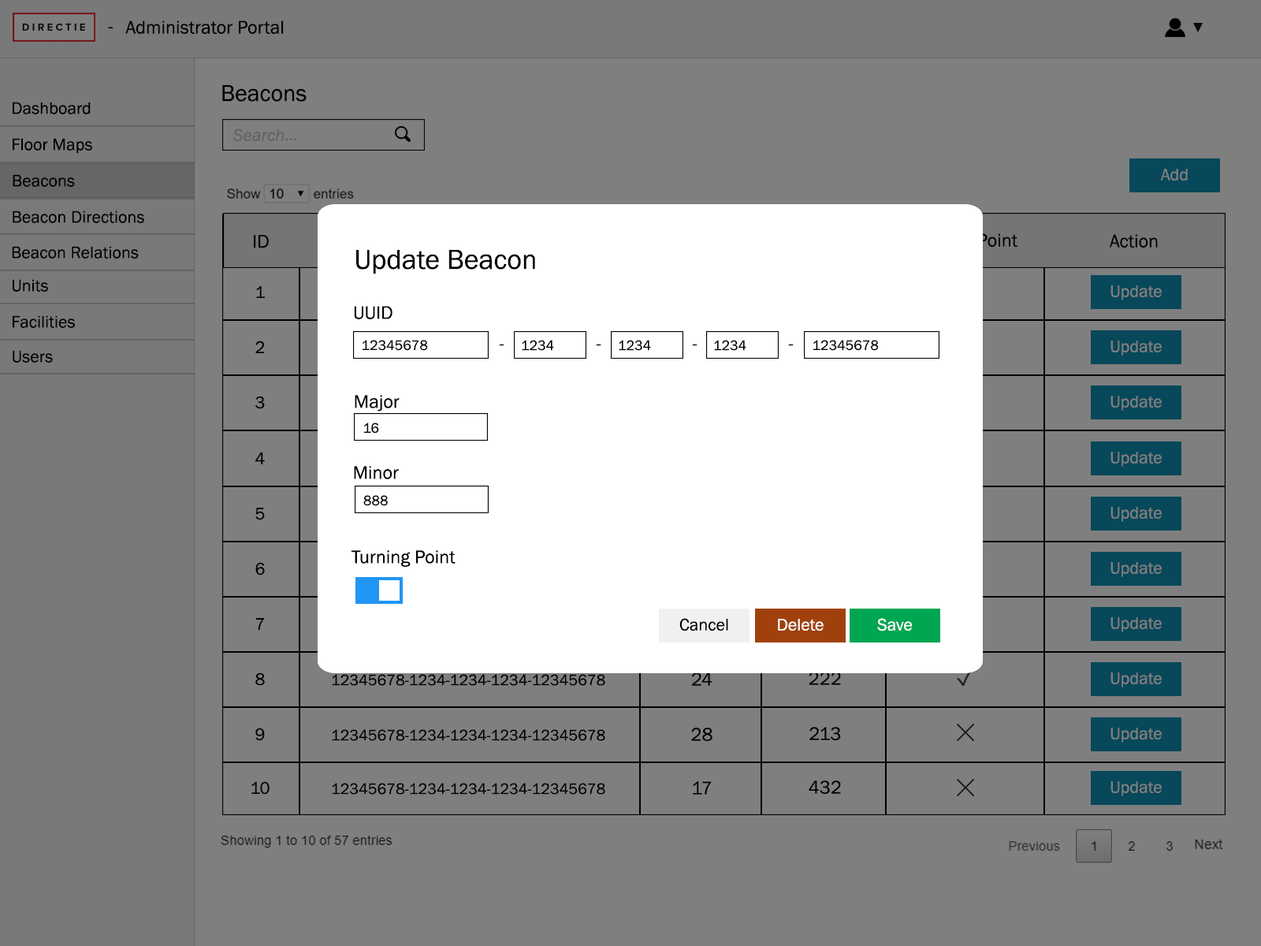
<style>
.page{position:relative;width:1261px;height:946px;background:#7f7f7f}
.page>*{position:absolute;margin:0}
.t1{font:18.9px "FranklinGothic-Book";color:#000000}
.t2{font:23.6px "FranklinGothic-Book";color:#000000}
.t3{font:17.3px "FranklinGothic-Book";color:#000000}
.t4{font:17.3px "FranklinGothic-Book";color:#7f7f7f}
.t5{font:28.4px "FranklinGothic-Book";color:#000000}
.t6{font:14.2px "FranklinGothic-Book";color:#000000}
.t7{font:17.3px "FranklinGothic-Book";color:#010101}
.t8{font:17.3px "FranklinGothic-Book";color:#fefefe}
.t9{font:15.8px "FranklinGothic-Book";color:#000000}
</style>
<div class="page">
<p class="t1" style="left:108px;top:27px;width:5px;height:1px">-</p>
<p class="t1" style="left:125px;top:20px;width:159px;height:14px">Administrator Portal</p>
<p class="t2" style="left:222px;top:85px;width:85px;height:17px">Beacons</p>
<p class="t3" style="left:13px;top:102px;width:78px;height:12px">Dashboard</p>
<p class="t3" style="left:13px;top:138px;width:79px;height:16px">Floor Maps</p>
<p class="t4" style="left:1160px;top:169px;width:28px;height:11px">Add</p>
<p class="t3" style="left:13px;top:174px;width:62px;height:13px">Beacons</p>
<p class="t3" style="left:13px;top:210px;width:131px;height:13px">Beacon Directions</p>
<p class="t3" style="left:12px;top:246px;width:127px;height:12px">Beacon Relations</p>
<p class="t1" style="left:254px;top:235px;width:15px;height:13px">ID</p>
<p class="t1" style="left:1109px;top:234px;width:49px;height:14px">Action</p>
<p class="t5" style="left:356px;top:250px;width:179px;height:24px">Update Beacon</p>
<p class="t3" style="left:13px;top:279px;width:35px;height:13px">Units</p>
<p class="t3" style="left:256px;top:285px;width:9px;height:13px">1</p>
<p class="t4" style="left:1110px;top:285px;width:52px;height:15px">Update</p>
<p class="t1" style="left:354px;top:306px;width:38px;height:13px">UUID</p>
<p class="t3" style="left:13px;top:315px;width:62px;height:13px">Facilities</p>
<p class="t3" style="left:255px;top:340px;width:10px;height:13px">2</p>
<p class="t6" style="left:363px;top:340px;width:65px;height:11px">12345678</p>
<p class="t6" style="left:522px;top:340px;width:32px;height:11px">1234</p>
<p class="t6" style="left:619px;top:340px;width:32px;height:11px">1234</p>
<p class="t6" style="left:714px;top:340px;width:32px;height:11px">1234</p>
<p class="t6" style="left:813px;top:340px;width:66px;height:11px">12345678</p>
<p class="t4" style="left:1110px;top:340px;width:52px;height:15px">Update</p>
<p class="t3" style="left:13px;top:350px;width:40px;height:13px">Users</p>
<p class="t1" style="left:499px;top:344px;width:5px;height:2px">-</p>
<p class="t1" style="left:596px;top:344px;width:5px;height:2px">-</p>
<p class="t1" style="left:692px;top:344px;width:5px;height:2px">-</p>
<p class="t1" style="left:788px;top:344px;width:6px;height:2px">-</p>
<p class="t3" style="left:255px;top:396px;width:10px;height:13px">3</p>
<p class="t1" style="left:355px;top:395px;width:45px;height:16px">Major</p>
<p class="t4" style="left:1110px;top:396px;width:52px;height:15px">Update</p>
<p class="t6" style="left:364px;top:422px;width:15px;height:11px">16</p>
<p class="t3" style="left:255px;top:452px;width:10px;height:12px">4</p>
<p class="t4" style="left:1110px;top:452px;width:52px;height:15px">Update</p>
<p class="t1" style="left:354px;top:466px;width:45px;height:13px">Minor</p>
<p class="t6" style="left:363px;top:495px;width:25px;height:11px">888</p>
<p class="t3" style="left:255px;top:508px;width:10px;height:12px">5</p>
<p class="t4" style="left:1110px;top:507px;width:52px;height:15px">Update</p>
<p class="t1" style="left:351px;top:550px;width:105px;height:17px">Turning Point</p>
<p class="t3" style="left:255px;top:562px;width:10px;height:13px">6</p>
<p class="t4" style="left:1110px;top:562px;width:52px;height:15px">Update</p>
<p class="t3" style="left:256px;top:618px;width:8px;height:12px">7</p>
<p class="t7" style="left:679px;top:618px;width:49px;height:12px">Cancel</p>
<p class="t8" style="left:877px;top:618px;width:35px;height:12px">Save</p>
<p class="t4" style="left:1110px;top:617px;width:52px;height:15px">Update</p>
<p class="t8" style="left:778px;top:619px;width:46px;height:11px">Delete</p>
<p class="t3" style="left:255px;top:672px;width:10px;height:14px">8</p>
<p class="t9" style="left:332px;top:674px;width:273px;height:12px">12345678-1234-1234-1234-12345678</p>
<p class="t1" style="left:692px;top:672px;width:20px;height:14px">24</p>
<p class="t1" style="left:809px;top:671px;width:32px;height:14px">222</p>
<p class="t4" style="left:1110px;top:672px;width:52px;height:15px">Update</p>
<p class="t3" style="left:255px;top:727px;width:10px;height:14px">9</p>
<p class="t9" style="left:332px;top:729px;width:273px;height:12px">12345678-1234-1234-1234-12345678</p>
<p class="t1" style="left:691px;top:727px;width:21px;height:14px">28</p>
<p class="t1" style="left:809px;top:727px;width:32px;height:13px">213</p>
<p class="t4" style="left:1110px;top:727px;width:52px;height:15px">Update</p>
<p class="t3" style="left:251px;top:781px;width:19px;height:13px">10</p>
<p class="t9" style="left:332px;top:783px;width:273px;height:11px">12345678-1234-1234-1234-12345678</p>
<p class="t1" style="left:693px;top:781px;width:19px;height:13px">17</p>
<p class="t1" style="left:809px;top:780px;width:32px;height:14px">432</p>
<p class="t4" style="left:1110px;top:781px;width:52px;height:15px">Update</p>
</div>
